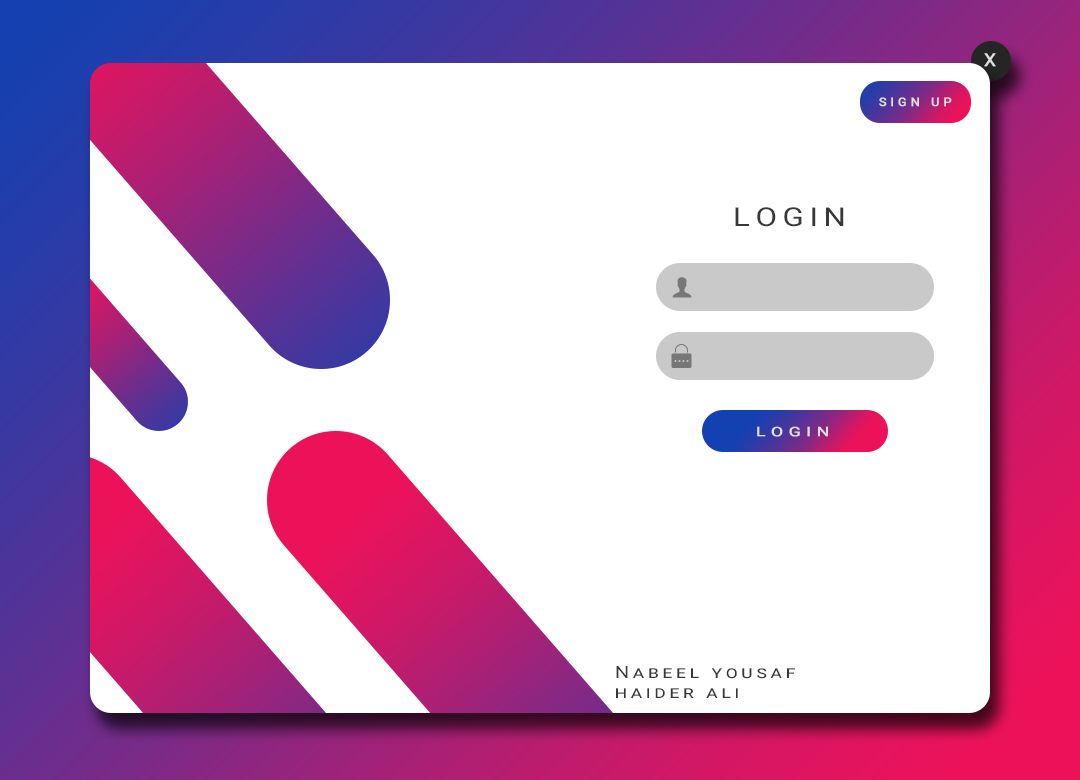
<style>
.page{position:relative;width:1080px;height:780px;background:#ffffff}
.page>*{position:absolute;margin:0}
.t1{font:18px "Roboto-Regular";letter-spacing:0.3em;color:#e0e0e0;font-weight:bold;scale:1.05 1}
.t2{font:12px "Roboto-Regular";letter-spacing:0.3em;color:#e0e0e0;text-transform:uppercase;font-weight:bold;scale:1.05 1}
.t3{font:26px "Roboto-Regular";letter-spacing:0.18em;color:#383838;text-transform:uppercase;scale:1.2 1}
.t4{font:13px "Roboto-Regular";letter-spacing:0.3em;color:#e0e0e0;text-transform:uppercase;font-weight:bold;scale:1.34 1}
.t5{font:16.9px "Roboto-Regular";letter-spacing:0.18em;color:#383838;font-variant:small-caps;scale:1.2 1}
</style>
<div class="page">
<p class="t1" style="left:984px;top:53px;width:12px;height:14px">X</p>
<p class="t2" style="left:879px;top:97px;width:73px;height:10px">sign up</p>
<p class="t3" style="left:735px;top:207px;width:109px;height:20px">login</p>
<p class="t4" style="left:757px;top:426px;width:71px;height:11px">login</p>
<p class="t5" style="left:616px;top:666px;width:179px;height:32px">Nabeel yousaf<br>haider ali</p>
</div>
